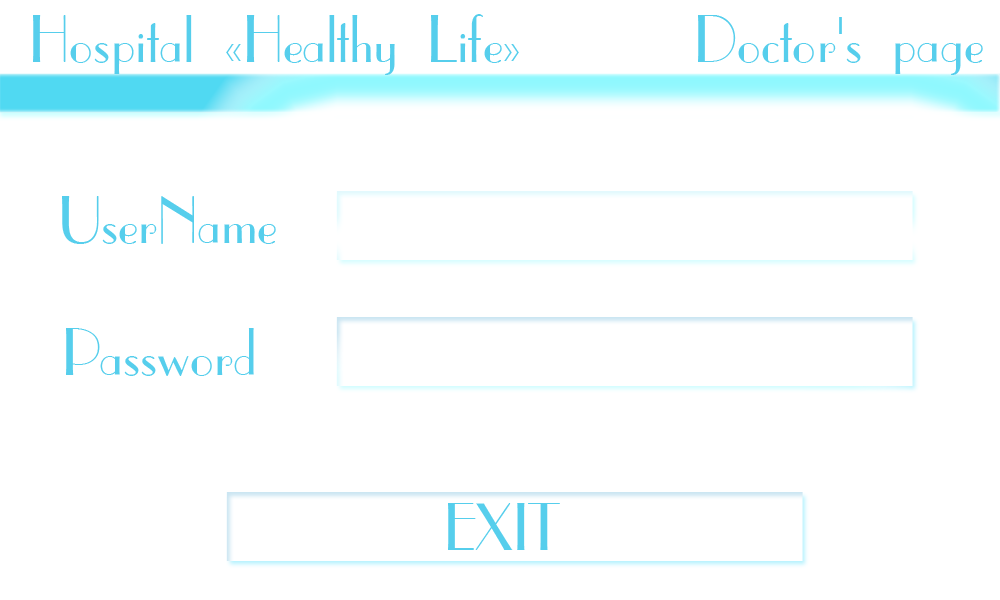
<style>
.page{position:relative;width:1000px;height:600px;background:#ffffff}
.page>*{position:absolute;margin:0}
.t1{font:63.5px "CafeParisC";color:#56ceec}
</style>
<div class="page">
<p class="t1" style="left:33px;top:14px;width:486px;height:61px">Hospital «Healthy Life»</p>
<p class="t1" style="left:698px;top:15px;width:285px;height:60px">Doctor's page</p>
<p class="t1" style="left:62px;top:196px;width:214px;height:48px">UserName</p>
<p class="t1" style="left:66px;top:328px;width:188px;height:48px">Password</p>
<p class="t1" style="left:448px;top:503px;width:112px;height:47px">EXIT</p>
</div>
